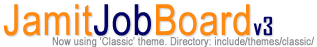
<style>
.page{position:relative;width:317px;height:47px;background:#ffffff}
.page>*{position:absolute;margin:0}
.t1{font:43px "ArialNarrow";color:#ff880e;font-weight:bold}
.t2{font:43px "ArialNarrow";color:#030267;font-weight:bold}
.t3{font:24px "AgencyFB-Reg";color:#030267;font-weight:bold}
.t4{font:11px "ArialNarrow";color:#8a8a8c;font-weight:bold}
</style>
<div class="page">
<p class="t1" style="left:3px;top:4px;width:269px;height:32px">Jamit<span class="t2">Job</span>Board<span class="t3">v3</span></p>
<p class="t4" style="left:52px;top:37px;width:262px;height:11px">Now using ‘Classic’ theme. Directory: include/themes/classic/</p>
</div>
